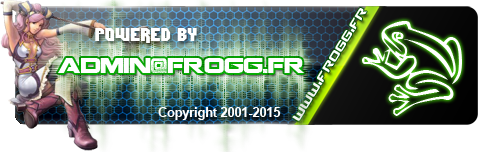
<style>
.page{position:relative;width:479px;height:152px;background:#ffffff}
.page>*{position:absolute;margin:0}
.t1{font:20.8px "Counter-StrikeRegular";color:#ffffff}
.t2{font:18.8px "Dimitri";color:#ffffff}
.t3{font:100px "KRFrogsforJennifer";color:#ffffff}
.t4{font:20.8px "Coalition";color:#ffffff}
.t5{font:12.5px "Arial-BoldMT";color:#ffffff}
</style>
<div class="page">
<p class="t1" style="left:292px;top:8px;width:75px;height:113px;rotate:-58deg">www.frogg.fr</p>
<p class="t2" style="left:95px;top:28px;width:102px;height:15px">Powered By</p>
<p class="t3" style="left:362px;top:21px;width:100px;height:95px">j</p>
<p class="t4" style="left:58px;top:58px;width:247px;height:15px">admin@frogg.fr</p>
<p class="t5" style="left:158px;top:107px;width:123px;height:13px">Copyright 2001-2015</p>
</div>
